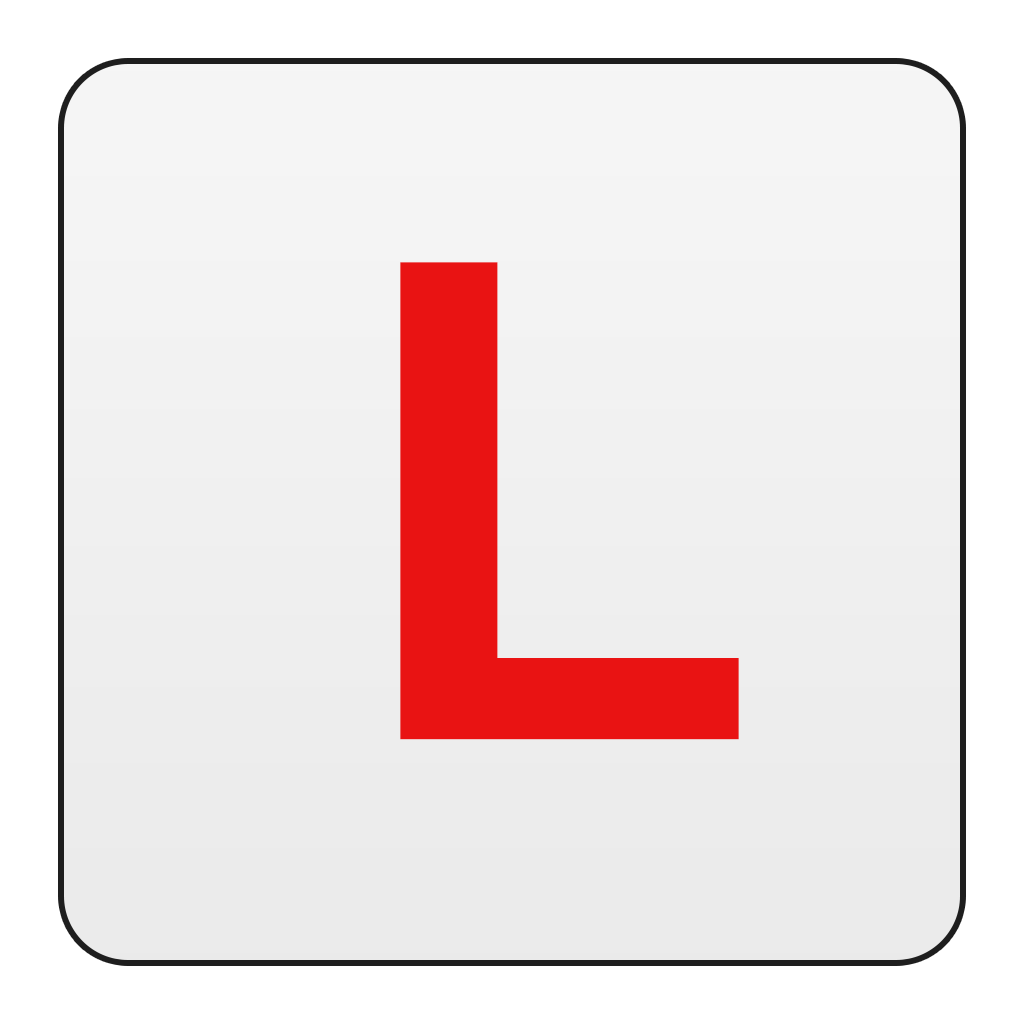
<style>
.page{position:relative;width:1024px;height:1024px;background:#ffffff}
.page>*{position:absolute;margin:0}
.t1{font:671.6px "Arial-BoldMT";letter-spacing:-0.04em;color:#e91313}
</style>
<div class="page">
<p class="t1" style="left:400px;top:262px;width:339px;height:478px">L</p>
</div>
